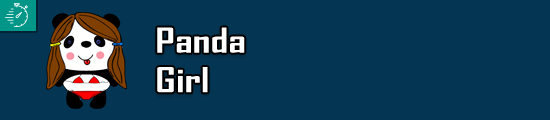
<style>
.page{position:relative;width:550px;height:120px;background:#043654}
.page>*{position:absolute;margin:0}
.t1{font:32.9px "AgencyFB-Bold";color:#ffffff;scale:1.33 1}
</style>
<div class="page">
<p class="t1" style="left:157px;top:27px;width:88px;height:66px">Panda <br>Girl</p>
</div>
